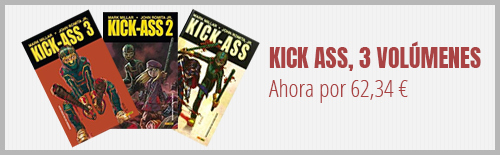
<style>
.page{position:relative;width:500px;height:155px;background:#f3f3f3}
.page>*{position:absolute;margin:0}
.t1{font:24px "Anton-Regular";color:#aa4343}
.t2{font:24px "OpenSansCondensed-Light";color:#aa4343}
</style>
<div class="page">
<p class="t1" style="left:269px;top:41px;width:212px;height:30px">KICK ASS, 3 VOLÚMENES</p>
<p class="t2" style="left:268px;top:79px;width:140px;height:24px">Ahora por 62,34 €</p>
</div>
